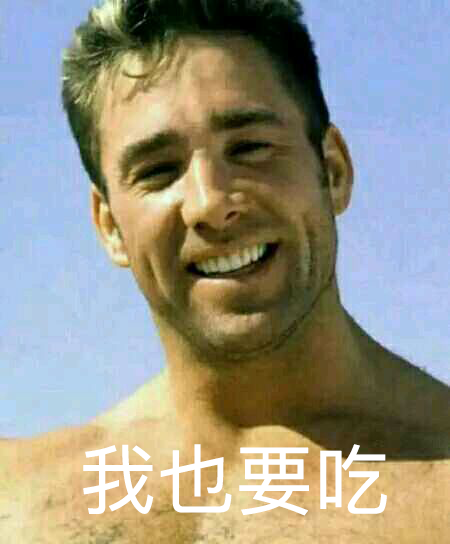
<style>
.page{position:relative;width:450px;height:544px}
.page>*{position:absolute;margin:0}
.t1{font:76.1px "PingFangSC-Regular";color:#ffffff;font-weight:bold}
</style>
<div class="page">
<p class="t1" style="left:83px;top:444px;width:304px;height:72px">我也要吃</p>
</div>
